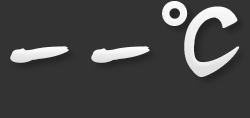
<style>
.page{position:relative;width:250px;height:118px;background:#333333}
.page>*{position:absolute;margin:0}
.t1{font:100px "HYh3gj";color:#ffffff}
.t2{font:160px "FZHJJW--GB1-0";color:#ffffff}
</style>
<div class="page">
<p class="t1" style="left:162px;top:1px;width:78px;height:76px">℃</p>
<p class="t2" style="left:10px;top:46px;width:59px;height:17px">-</p>
<p class="t2" style="left:91px;top:46px;width:59px;height:17px">-</p>
</div>
